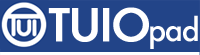
<style>
.page{position:relative;width:200px;height:55px;background:#224488}
.page>*{position:absolute;margin:0}
.t1{font:43.7px "Futura-Medium";letter-spacing:-0.06em;color:#ffffff;font-weight:bold}
.t2{font:30.6px "Futura-Medium";letter-spacing:-0.06em;color:#ffffff}
</style>
<div class="page">
<p class="t1" style="left:48px;top:7px;width:150px;height:42px">TUIO<span class="t2">pad</span></p>
</div>
